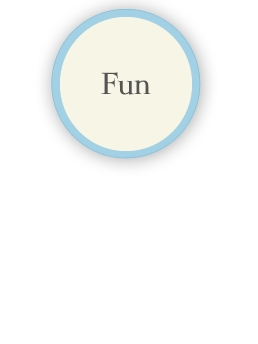
<style>
.page{position:relative;width:258px;height:344px;background:#ffffff}
.page>*{position:absolute;margin:0}
.t1{font:36px "ParmaPetit-Normal";color:#545454}
</style>
<div class="page">
<p class="t1" style="left:101px;top:72px;width:50px;height:23px">Fun</p>
</div>
